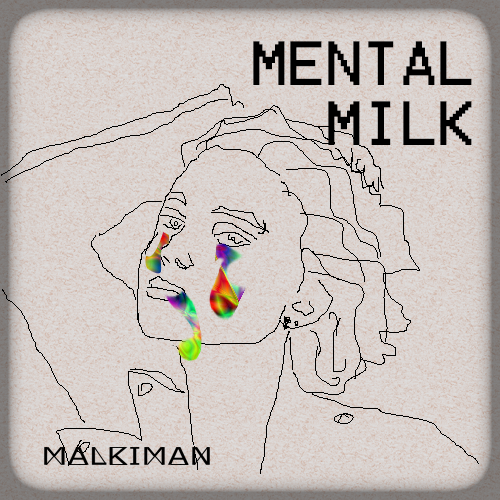
<style>
.page{position:relative;width:500px;height:500px}
.page>*{position:absolute;margin:0}
.t1{font:50px "Terminal";color:#000000}
</style>
<div class="page">
<p class="t1" style="left:253px;top:41px;width:219px;height:104px;text-align:right">MENTAL<br>MILK</p>
</div>
